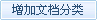
<style>
.page{position:relative;width:97px;height:20px}
.page>*{position:absolute;margin:0}
.t1{font:12px "SimSun";color:#294f76}
</style>
<div class="page">
<p class="t1" style="left:12px;top:4px;width:71px;height:11px">增加文档分类</p>
</div>
